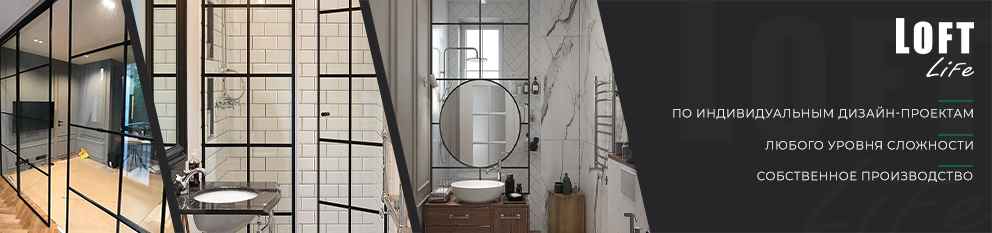
<style>
.page{position:relative;width:992px;height:233px;background:#262628}
.page>*{position:absolute;margin:0}
.t1{font:12.4px "Montserrat-Regular";letter-spacing:0.04em;color:#ffffff;text-transform:uppercase;scale:0.95 1}
</style>
<div class="page">
<p class="t1" style="left:673px;top:106px;width:300px;height:14px">ПО ИНДИВИДУАЛЬНЫМ ДИЗАЙН-ПРОЕКТАМ</p>
<p class="t1" style="left:765px;top:141px;width:208px;height:9px">ЛЮБОГО УРОВНЯ СЛОЖНОСТИ</p>
<p class="t1" style="left:757px;top:171px;width:216px;height:11px">Собственное производство</p>
</div>
